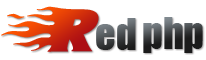
<style>
.page{position:relative;width:206px;height:60px;background:#ffffff}
.page>*{position:absolute;margin:0}
.t1{font:60px "Blazed"}
.t2{font:40px "Impact";color:#333333}
.t3{font:40px "Impact"}
</style>
<div class="page">
<p class="t1" style="left:1px;top:6px;width:98px;height:46px">R</p>
<p class="t2" style="left:143px;top:17px;width:60px;height:36px">php</p>
<p class="t3" style="left:96px;top:18px;width:40px;height:32px">ed</p>
</div>
